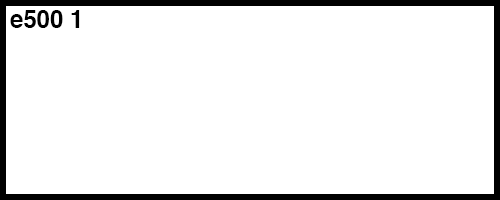
<style>
.page{position:relative;width:500px;height:200px;background:#ffffff}
.page>*{position:absolute;margin:0}
.t1{font:24px "Helvetica-Bold";color:#000000}
</style>
<div class="page">
<p class="t1" style="left:10px;top:10px;width:70px;height:18px">e500 1</p>
</div>
